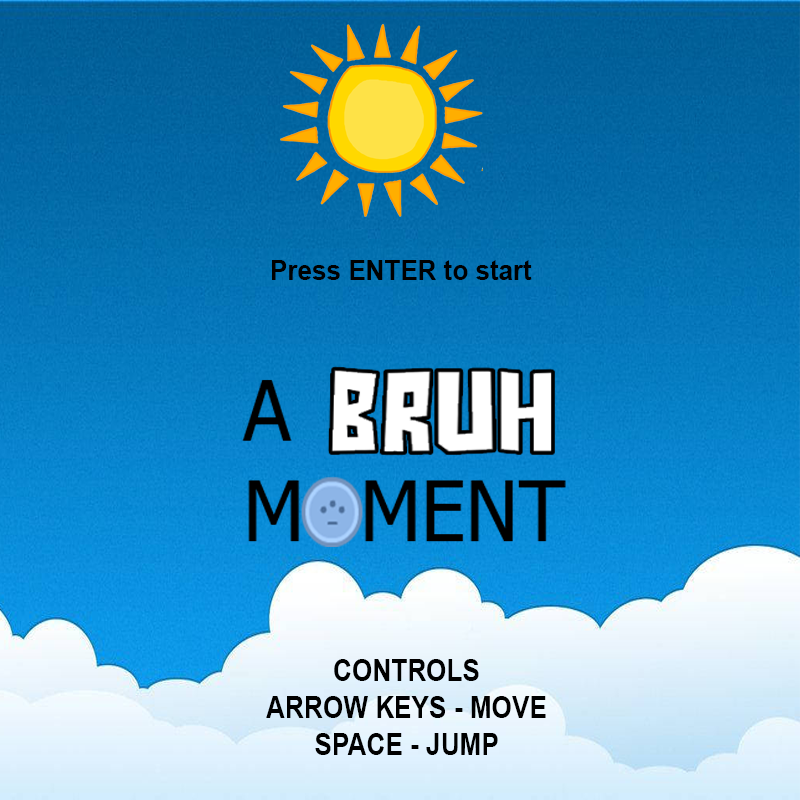
<style>
.page{position:relative;width:800px;height:800px}
.page>*{position:absolute;margin:0}
.t1{font:27.8px "Arial-BoldMT";color:#000000;scale:0.94 1}
.t2{font:30.9px "Arial-BoldMT";color:#000000;scale:0.85 1}
</style>
<div class="page">
<p class="t1" style="left:272px;top:260px;width:260px;height:20px">Press ENTER to start</p>
<p class="t2" style="left:266px;top:659px;width:280px;height:96px;text-align:center">CONTROLS<br>ARROW KEYS - MOVE<br>SPACE - JUMP</p>
</div>
